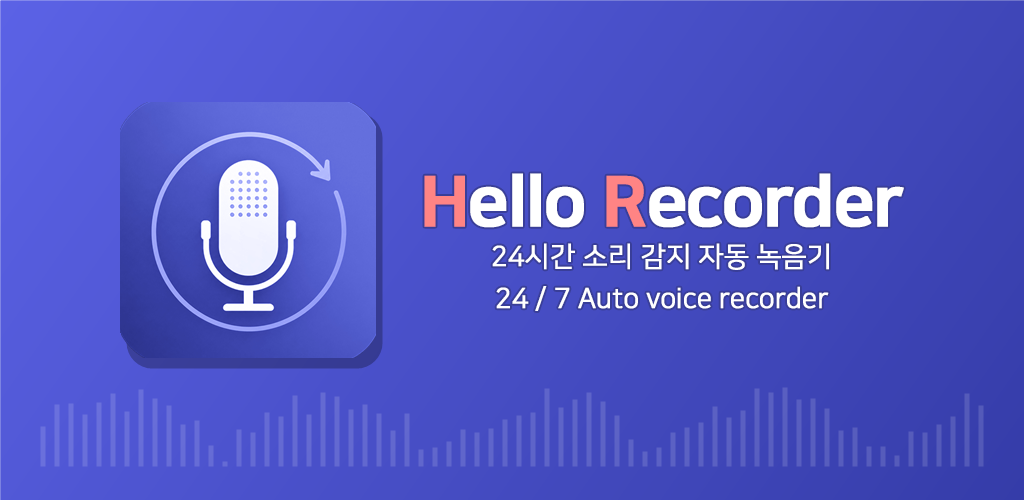
<style>
.page{position:relative;width:1024px;height:500px}
.page>*{position:absolute;margin:0}
.t1{font:27.7px/41.5px "NanumSquareR";letter-spacing:-0.02em;color:#ffffff;font-weight:bold}
.t2{font:69.2px/41.5px "NanumSquareEB";letter-spacing:-0.04em;color:#ff8484;font-weight:bold}
.t3{font:69.2px/41.5px "NanumSquareEB";letter-spacing:-0.04em;color:#ffffff;font-weight:bold}
</style>
<div class="page">
<p class="t1" style="left:424px;top:173px;width:480px;height:138px;text-align:center"><span class="t2">H</span><span class="t3">ello </span><span class="t2">R</span><span class="t3">ecorder<br></span>24시간 소리 감지 자동 녹음기<br>24 / 7 Auto voice recorder</p>
</div>
